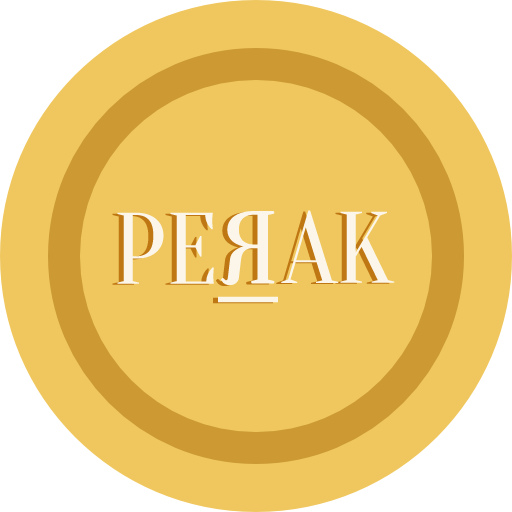
<style>
.page{position:relative;width:512px;height:512px;background:#efc75e}
.page>*{position:absolute;margin:0}
.t1{font:101.2px "Oranienbaum";color:#ffffff}
.t2{font:101.2px "Oranienbaum";color:#ffffff;font-weight:bold;text-decoration:underline}
</style>
<div class="page">
<p class="t1" style="left:117px;top:212px;width:97px;height:72px">PE</p>
<p class="t2" style="left:218px;top:211px;width:60px;height:92px;rotate:180deg">R</p>
<p class="t1" style="left:281px;top:210px;width:114px;height:73px">AK</p>
</div>
